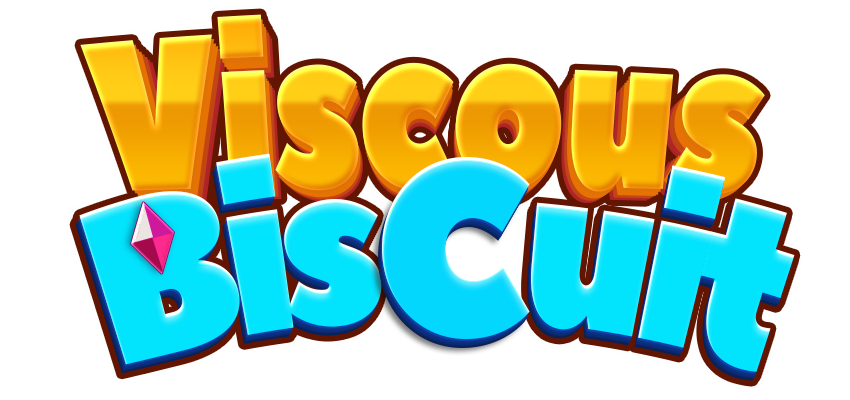
<style>
.page{position:relative;width:850px;height:400px;background:#ffffff}
.page>*{position:absolute;margin:0}
.t1{font:208.5px "PeaceSans";letter-spacing:-0.025em;scale:0.83 1}
.t2{font:206.4px "PeaceSans";letter-spacing:-0.025em;scale:0.83 1}
.t3{font:204.3px "PeaceSans";letter-spacing:-0.025em;scale:0.83 1}
.t4{font:202.3px "PeaceSans";letter-spacing:-0.025em;scale:0.83 1}
.t5{font:200.2px "PeaceSans";letter-spacing:-0.025em;scale:0.83 1}
.t6{font:198.2px "PeaceSans";letter-spacing:-0.025em;scale:0.83 1}
.t7{font:196.3px "PeaceSans";letter-spacing:-0.025em;scale:0.83 1}
.t8{font:225.8px "PeaceSans";letter-spacing:-0.075em;color:#02e3fd;scale:0.77 1}
.t9{font:249.2px "PeaceSans";color:#03d7fd;scale:0.91 1}
</style>
<div class="page">
<p class="t1" style="left:80px;top:14px;width:685px;height:180px">Viscous</p>
<p class="t2" style="left:83px;top:19px;width:679px;height:178px">Viscous</p>
<p class="t3" style="left:87px;top:24px;width:671px;height:176px">Viscous</p>
<p class="t4" style="left:90px;top:26px;width:665px;height:175px">Viscous</p>
<p class="t5" style="left:94px;top:29px;width:658px;height:174px">Viscous</p>
<p class="t6" style="left:97px;top:32px;width:652px;height:172px">Viscous</p>
<p class="t7" style="left:100px;top:35px;width:645px;height:170px">Viscous</p>
<p class="t8" style="left:79px;top:153px;width:716px;height:219px">Bis      uit</p>
<p class="t9" style="left:382px;top:157px;width:148px;height:182px">C</p>
</div>
